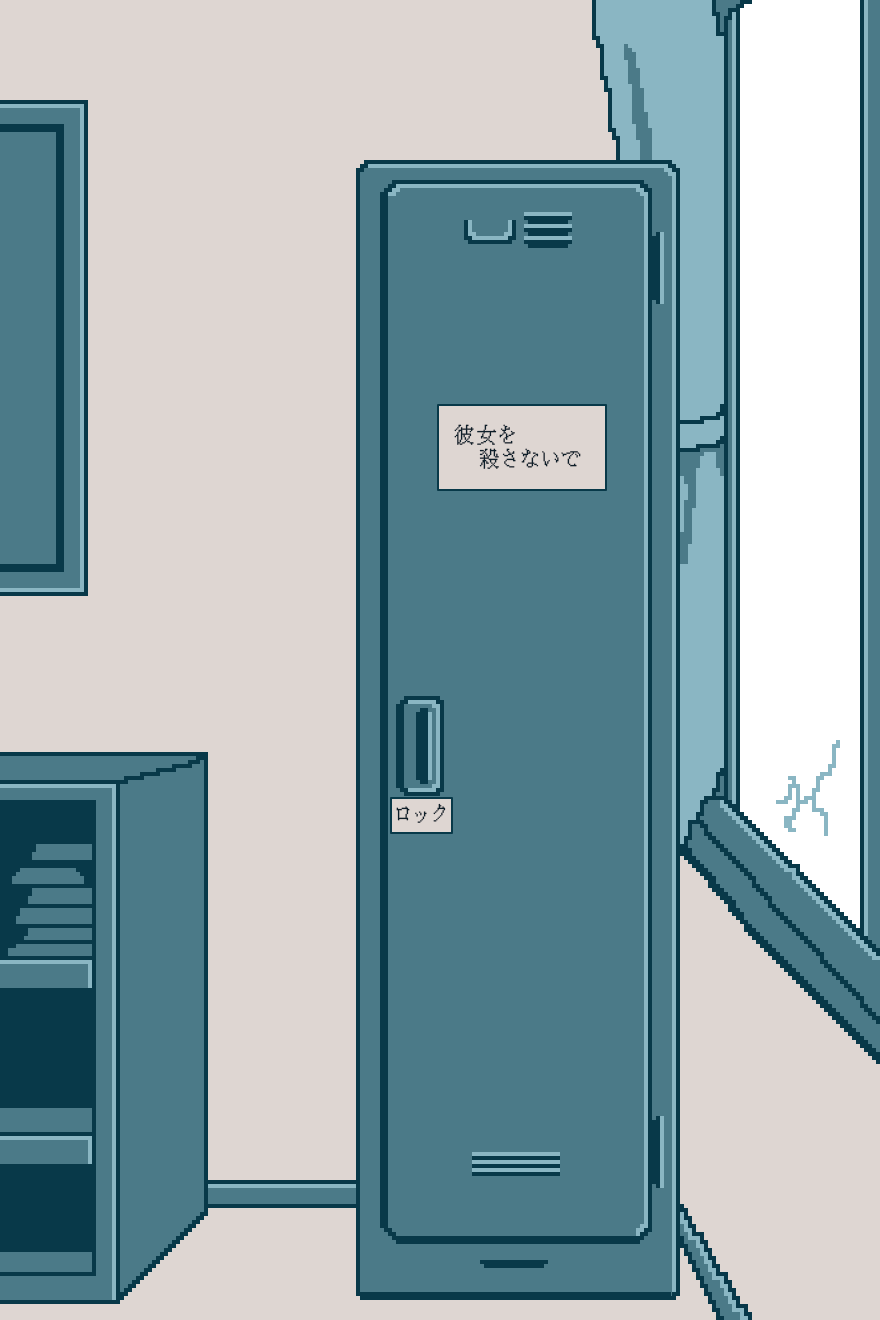
<style>
.page{position:relative;width:880px;height:1320px;background:#4b7a88}
.page>*{position:absolute;margin:0}
.t1{font:20px "KH-Dot-kagurazaka-16";letter-spacing:0.12em;color:#0a192d}
</style>
<div class="page">
<p class="t1" style="left:454px;top:424px;width:127px;height:45px;text-align:center">彼女を<br>　　　　殺さないで</p>
<p class="t1" style="left:396px;top:803px;width:50px;height:20px">ロック</p>
</div>
